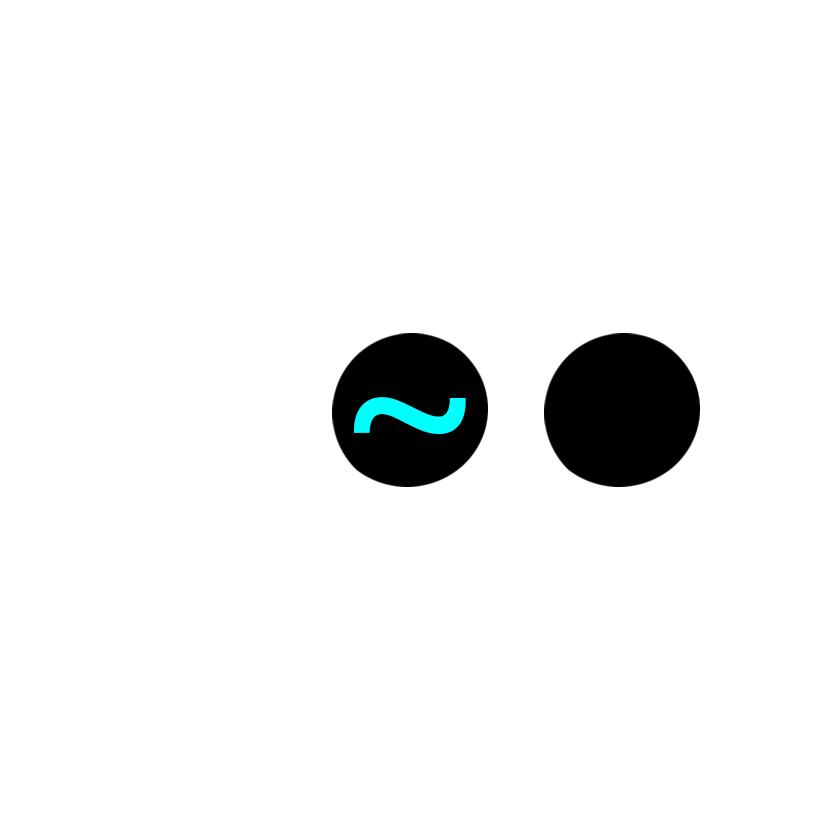
<style>
.page{position:relative;width:820px;height:820px;background:#ffffff}
.page>*{position:absolute;margin:0}
.t1{font:200px "AdobeHeitiStd-Regular";color:#00ffff}
</style>
<div class="page">
<p class="t1" style="left:354px;top:397px;width:112px;height:37px">~</p>
</div>
